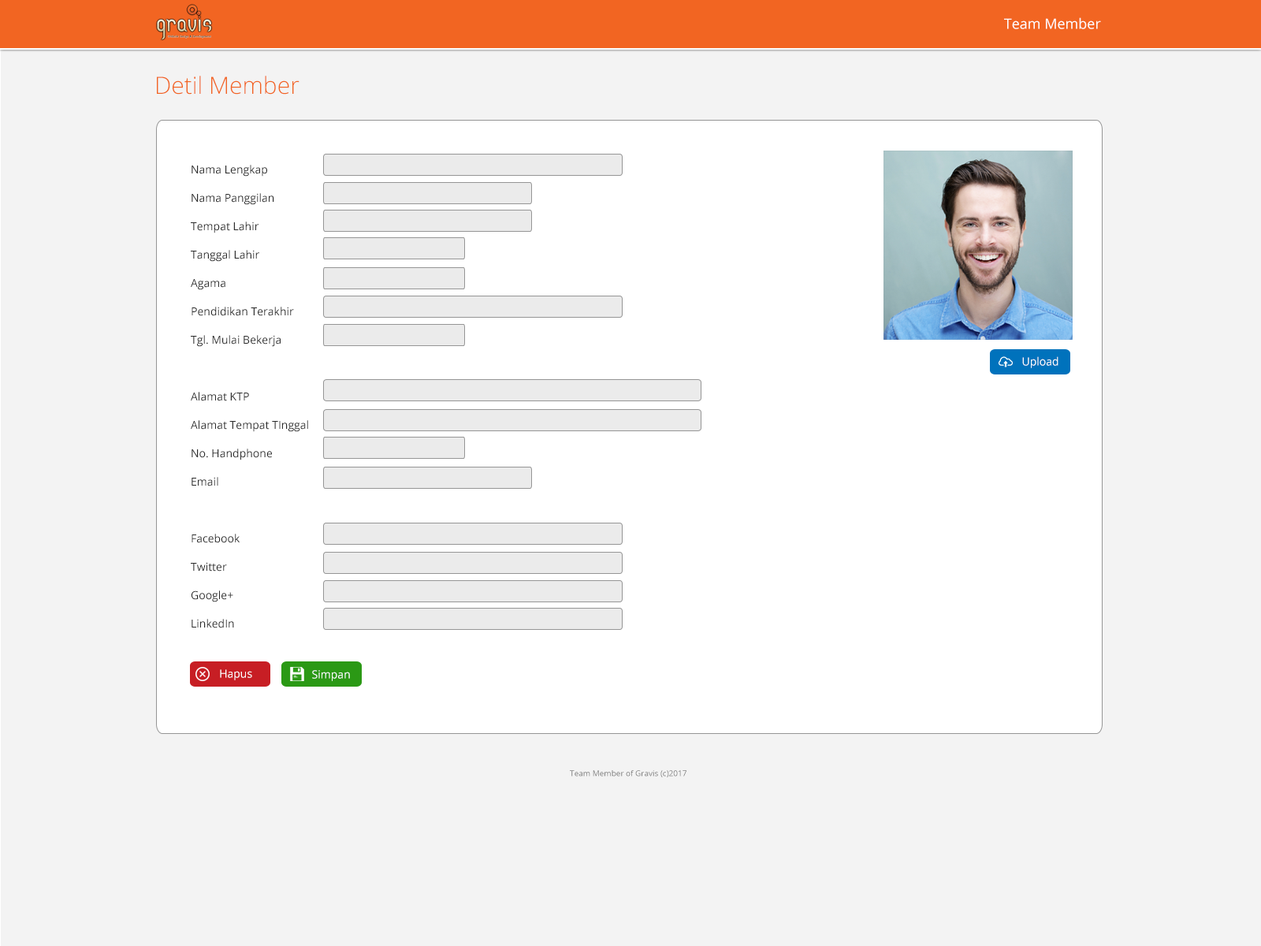
<style>
.page{position:relative;width:1261px;height:946px;background:#f3f3f3}
.page>*{position:absolute;margin:0}
.t1{font:14.2px "OpenSans";color:#ffffff}
.t2{font:23.6px "OpenSans-Light";color:#f26522}
.t3{font:11px/28.4px "OpenSans";color:#2a2a2a}
.t4{font:11px "OpenSans";color:#ffffff}
.t5{font:7.9px "OpenSans";color:#7c7c7c}
</style>
<div class="page">
<p class="t1" style="left:1004px;top:17px;width:97px;height:12px">Team Member</p>
<p class="t2" style="left:157px;top:76px;width:142px;height:19px">Detil Member</p>
<p class="t3" style="left:191px;top:165px;width:117px;height:463px">Nama Lengkap<br>Nama Panggilan<br>Tempat Lahir<br>Tanggal Lahir<br>Agama<br>Pendidikan Terakhir<br>Tgl. Mulai Bekerja<br><br>Alamat KTP<br>Alamat Tempat TInggal<br>No. Handphone<br>Email<br><br>Facebook<br>Twitter<br>Google+<br>LinkedIn</p>
<p class="t4" style="left:1022px;top:356px;width:36px;height:12px">Upload</p>
<p class="t4" style="left:220px;top:669px;width:32px;height:11px">Hapus</p>
<p class="t4" style="left:312px;top:670px;width:38px;height:11px">Simpan</p>
<p class="t5" style="left:570px;top:770px;width:116px;height:7px">Team Member of Gravis (c)2017</p>
</div>
